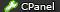
<style>
.page{position:relative;width:60px;height:12px;background:#333333}
.page>*{position:absolute;margin:0}
.t1{font:10px "Verdana";color:#ffffff}
</style>
<div class="page">
<p class="t1" style="left:21px;top:2px;width:33px;height:8px">CPanel</p>
</div>
